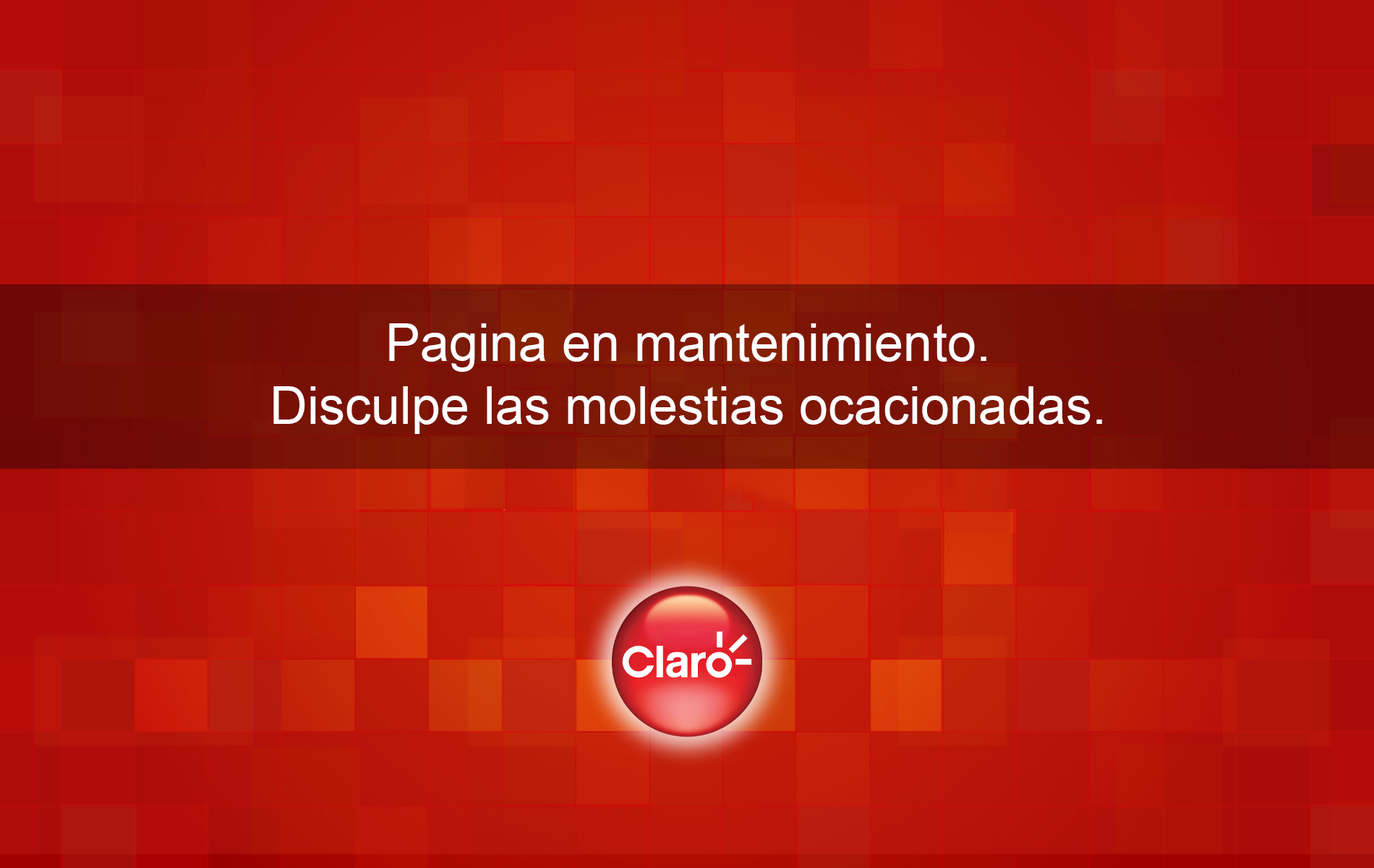
<style>
.page{position:relative;width:1374px;height:868px}
.page>*{position:absolute;margin:0}
.t1{font:52.1px "ArialMT";color:#ffffff}
</style>
<div class="page">
<p class="t1" style="left:273px;top:323px;width:829px;height:111px;text-align:center">Pagina en mantenimiento.<br>Disculpe las molestias ocacionadas.</p>
</div>
